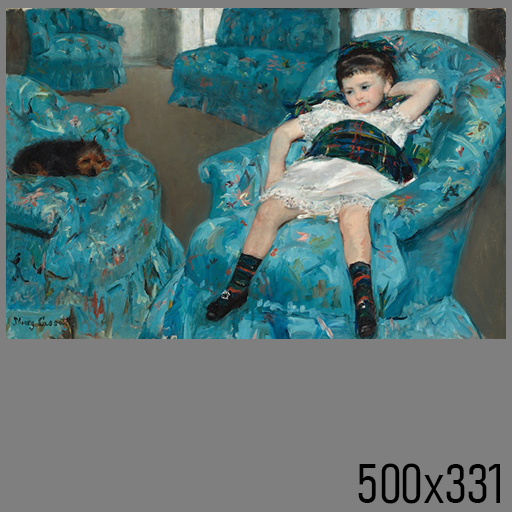
<style>
.page{position:relative;width:512px;height:512px;background:#7f7f7f}
.page>*{position:absolute;margin:0}
.t1{font:55px "Bahnschrift-LightCondensed";color:#000000}
</style>
<div class="page">
<p class="t1" style="left:358px;top:463px;width:142px;height:41px">500x331</p>
</div>
